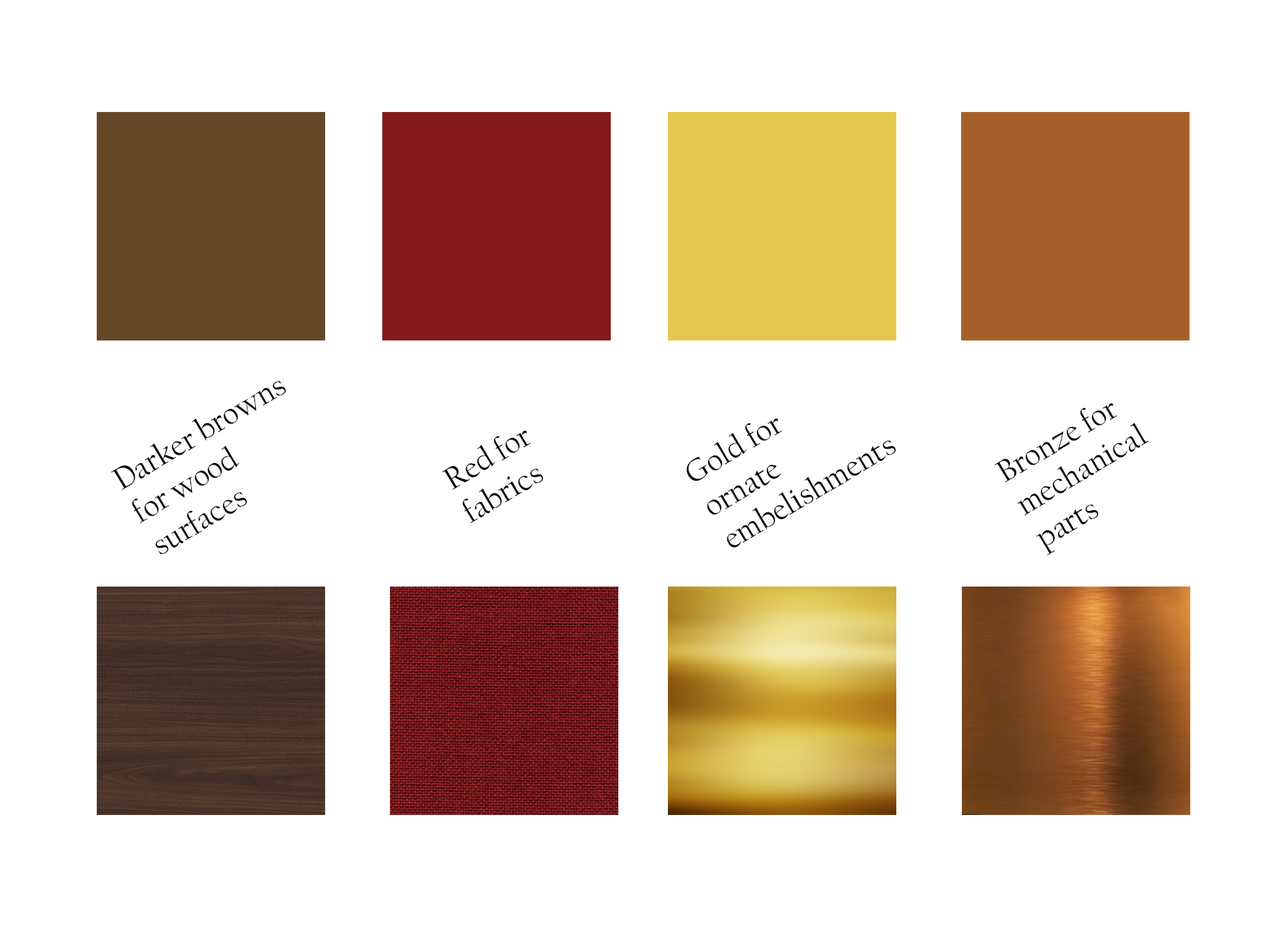
<style>
.page{position:relative;width:1287px;height:927px;background:#ffffff}
.page>*{position:absolute;margin:0}
.t1{font:31.7px "CalifornianFB-Reg";color:#000000}
</style>
<div class="page">
<p class="t1" style="left:111px;top:381px;width:175px;height:173px;rotate:-31deg">Darker browns<br>for wood<br>surfaces</p>
<p class="t1" style="left:994px;top:403px;width:155px;height:152px;rotate:-31deg">Bronze for<br>mechanical<br>parts</p>
<p class="t1" style="left:686px;top:418px;width:209px;height:129px;rotate:-31deg">Gold for<br>ornate<br>embelishments</p>
<p class="t1" style="left:442px;top:430px;width:101px;height:93px;rotate:-31deg">Red for <br>fabrics</p>
</div>
